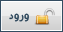
<style>
.page{position:relative;width:63px;height:32px}
.page>*{position:absolute;margin:0}
.t1{font:12px "Mj_CasablancaLight";color:#274257}
</style>
<div class="page">
<p class="t1" style="left:9px;top:13px;width:20px;height:9px">ورود</p>
</div>
